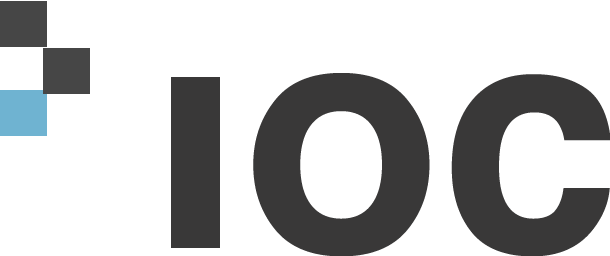
<style>
.page{position:relative;width:610px;height:256px;background:#ffffff}
.page>*{position:absolute;margin:0}
.t1{font:323.3px "Helvetica-Bold";color:#393838}
</style>
<div class="page">
<p class="t1" style="left:253px;top:73px;width:358px;height:184px">oc</p>
</div>
